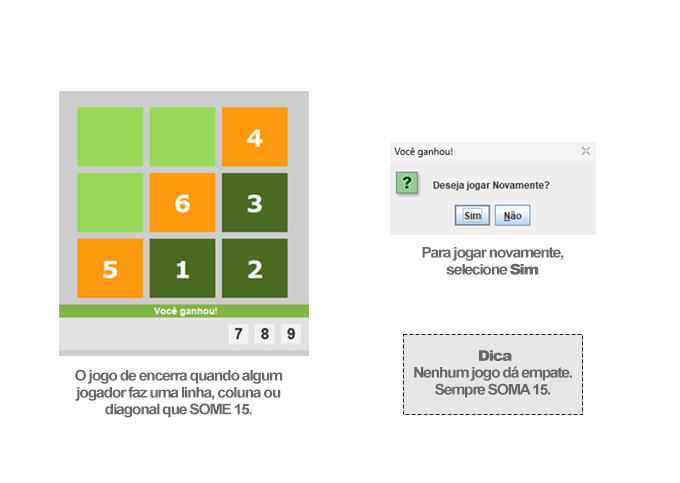
<style>
.page{position:relative;width:680px;height:483px;background:#ffffff}
.page>*{position:absolute;margin:0}
.t1{font:14.8px "Arial-BoldMT";letter-spacing:-0.08em;color:#686868;scale:1.06 1}
.t2{font:14.8px "Arial-Black";letter-spacing:-0.08em;color:#686868;scale:1.06 1}
</style>
<div class="page">
<p class="t1" style="left:422px;top:247px;width:142px;height:28px;text-align:center">Para jogar novamente,<br>selecione <span class="t2">Sim</span></p>
<p class="t1" style="left:414px;top:350px;width:158px;height:48px;text-align:center"><span class="t2">Dica<br></span>Nenhum jogo dá empate. <br>Sempre SOMA 15.</p>
<p class="t1" style="left:75px;top:369px;width:208px;height:49px;text-align:center">O jogo de encerra quando algum<br>jogador faz uma linha, coluna ou<br>diagonal que SOME 15.</p>
</div>
